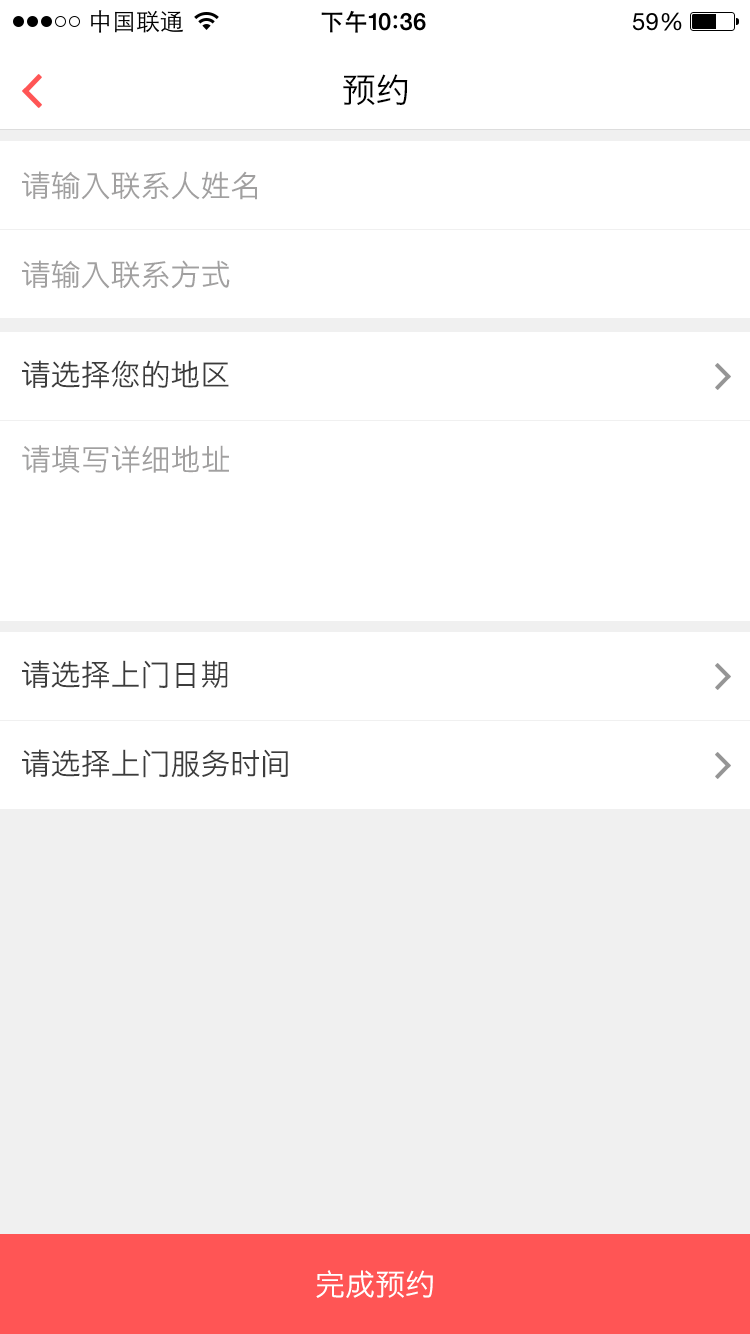
<style>
.page{position:relative;width:750px;height:1334px;background:#ffffff}
.page>*{position:absolute;margin:0}
.t1{font:34px "STHeitiSC-Light";color:#000000}
.t2{font:30px "STHeitiSC-Light";color:#a1a0a0}
.t3{font:30px "STHeitiSC-Light";color:#3c3c3c}
.t4{font:30px "STHeitiSC-Light";color:#ffffff}
</style>
<div class="page">
<p class="t1" style="left:343px;top:74px;width:65px;height:31px">预约</p>
<p class="t2" style="left:22px;top:171px;width:235px;height:29px">请输入联系人姓名</p>
<p class="t2" style="left:22px;top:260px;width:208px;height:29px">请输入联系方式</p>
<p class="t3" style="left:22px;top:360px;width:207px;height:29px">请选择您的地区</p>
<p class="t2" style="left:22px;top:445px;width:207px;height:28px">请填写详细地址</p>
<p class="t3" style="left:22px;top:660px;width:206px;height:29px">请选择上门日期</p>
<p class="t3" style="left:22px;top:749px;width:266px;height:29px">请选择上门服务时间</p>
<p class="t4" style="left:316px;top:1270px;width:117px;height:28px">完成预约</p>
</div>
